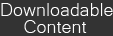
<style>
.page{position:relative;width:113px;height:36px;background:#333333}
.page>*{position:absolute;margin:0}
.t1{font:24px "Microsoft-Yi-Baiti";color:#ffffff}
</style>
<div class="page">
<p class="t1" style="left:1px;top:3px;width:112px;height:13px">Downloadable</p>
<p class="t1" style="left:24px;top:20px;width:63px;height:13px">Content</p>
</div>
